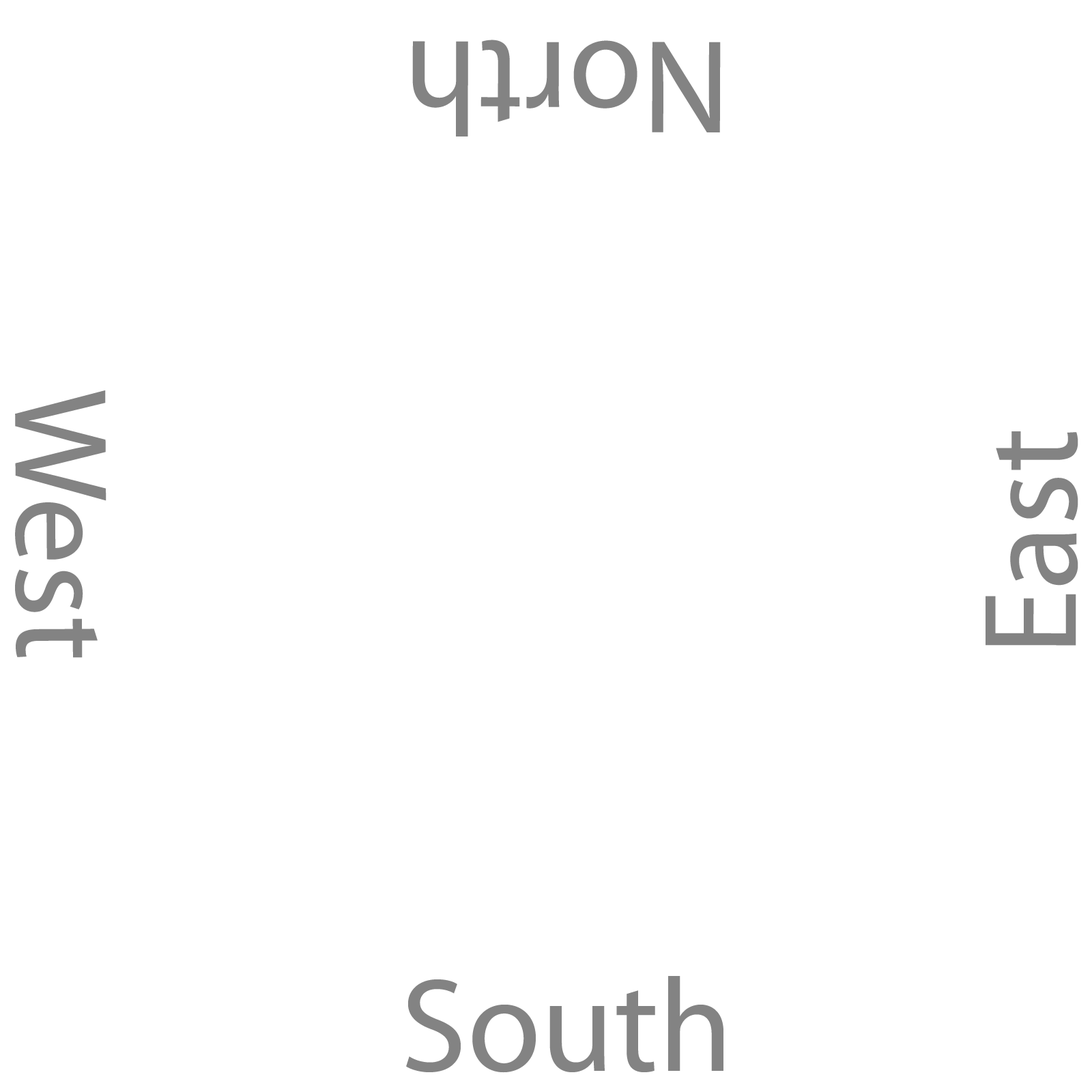
<style>
.page{position:relative;width:1092px;height:1092px;background:#ffffff}
.page>*{position:absolute;margin:0}
.t1{font:133.7px "MyriadPro-Regular";color:#838383}
</style>
<div class="page">
<p class="t1" style="left:412px;top:40px;width:309px;height:96px;rotate:-180deg">North</p>
<p class="t1" style="left:15px;top:390px;width:91px;height:268px;rotate:90deg">West</p>
<p class="t1" style="left:986px;top:431px;width:92px;height:215px;rotate:-90deg">East</p>
<p class="t1" style="left:406px;top:976px;width:317px;height:97px">South</p>
</div>
